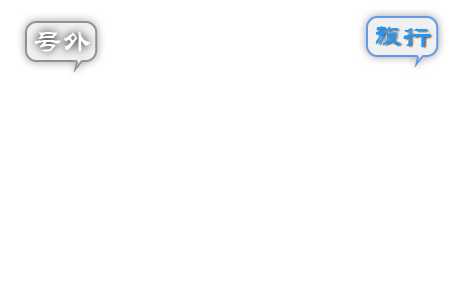
<style>
.page{position:relative;width:450px;height:300px;background:#ffffff}
.page>*{position:absolute;margin:0}
.t1{font:29px "STLiti";color:#2297fa}
.t2{font:29px "STLiti";color:#ffffff}
</style>
<div class="page">
<p class="t1" style="left:375px;top:26px;width:56px;height:22px">旅行</p>
<p class="t2" style="left:34px;top:31px;width:57px;height:21px">号外</p>
</div>
